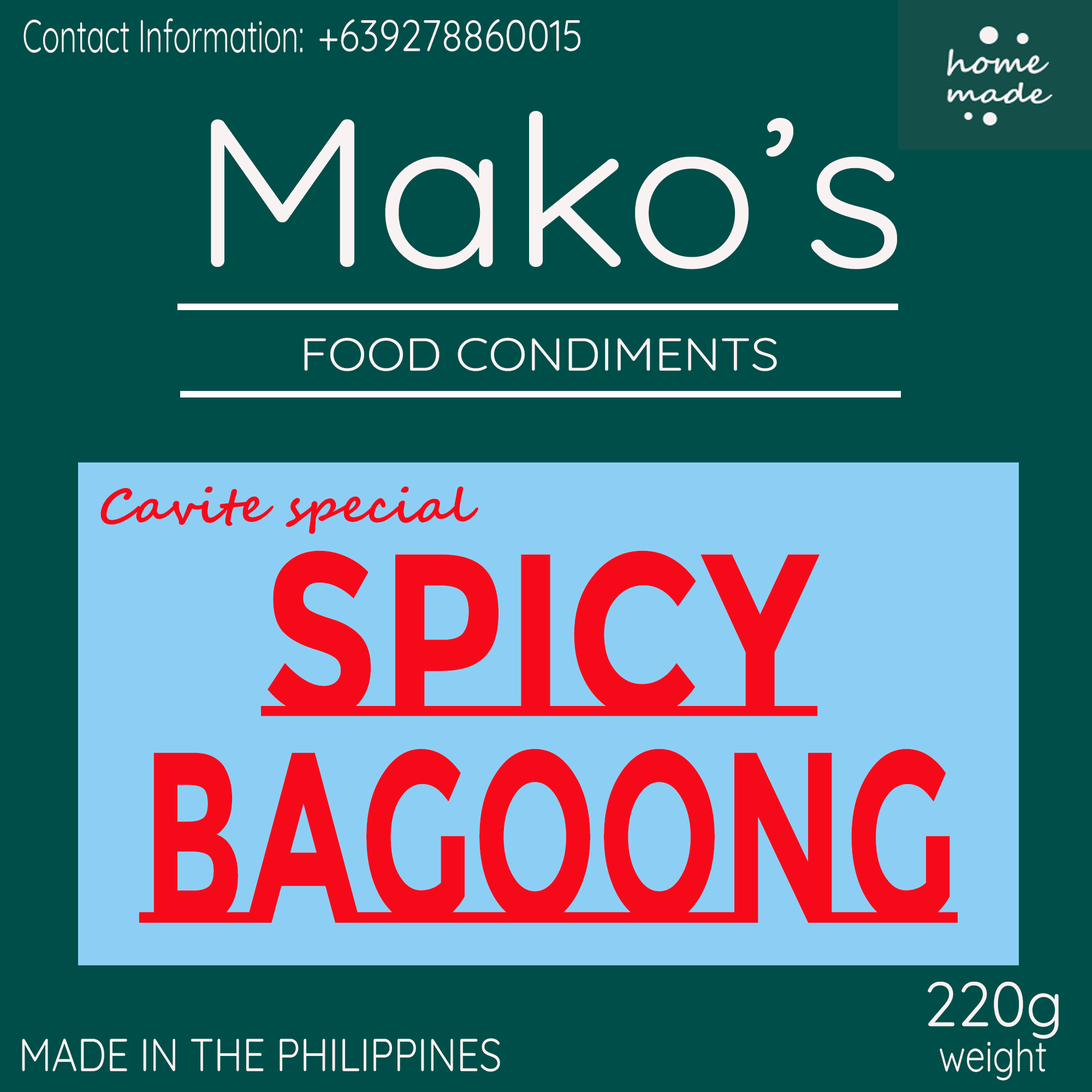
<style>
.page{position:relative;width:1092px;height:1092px;background:#004e49}
.page>*{position:absolute;margin:0}
.t1{font:46.1px "Quicksand-Regular";color:#f9f2f2;scale:0.64 1}
.t2{font:44px "Quicksand-Regular";color:#f9f2f2;scale:0.86 1}
.t3{font:210.5px "Quicksand-Regular";color:#f9f2f2;scale:1.06 1}
.t4{font:46.1px "Quicksand-Regular";color:#f9f2f2;scale:1.1 1}
.t5{font:47.4px "SegoeScript-Bold";color:#f60a1a;scale:1.06 1}
.t6{font:230.9px "MontserratSubrayada-Bold";color:#f60a1a;scale:0.8 1}
.t7{font:242.8px "MontserratSubrayada-Bold";color:#f60a1a;scale:0.62 1}
.t8{font:62.5px "Quicksand-Regular";color:#f9f2f2;scale:0.95 1}
.t9{font:46.1px "Quicksand-Regular";color:#f9f2f2;scale:0.87 1}
.t10{font:44px "Quicksand-Regular";color:#f9f2f2;scale:0.81 1}
</style>
<div class="page">
<p class="t1" style="left:23px;top:18px;width:279px;height:35px">Contact Information:</p>
<p class="t2" style="left:319px;top:19px;width:261px;height:33px">+639278860015</p>
<p class="t3" style="left:211px;top:111px;width:686px;height:158px">Mako’s</p>
<p class="t4" style="left:304px;top:337px;width:473px;height:34px">FOOD CONDIMENTS</p>
<p class="t5" style="left:100px;top:486px;width:378px;height:48px">Cavite special</p>
<p class="t6" style="left:261px;top:550px;width:559px;height:166px">Spicy</p>
<p class="t7" style="left:139px;top:749px;width:819px;height:174px">bagoong</p>
<p class="t8" style="left:928px;top:982px;width:131px;height:57px">220g</p>
<p class="t9" style="left:22px;top:1038px;width:478px;height:34px">MADE IN THE PHILIPPINES</p>
<p class="t10" style="left:940px;top:1038px;width:106px;height:43px">weight</p>
</div>
